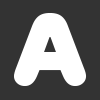
<style>
.page{position:relative;width:100px;height:100px;background:#333333}
.page>*{position:absolute;margin:0}
.t1{font:100.5px "RoundsBlack";color:#ffffff}
</style>
<div class="page">
<p class="t1" style="left:14px;top:13px;width:73px;height:73px">A</p>
</div>
